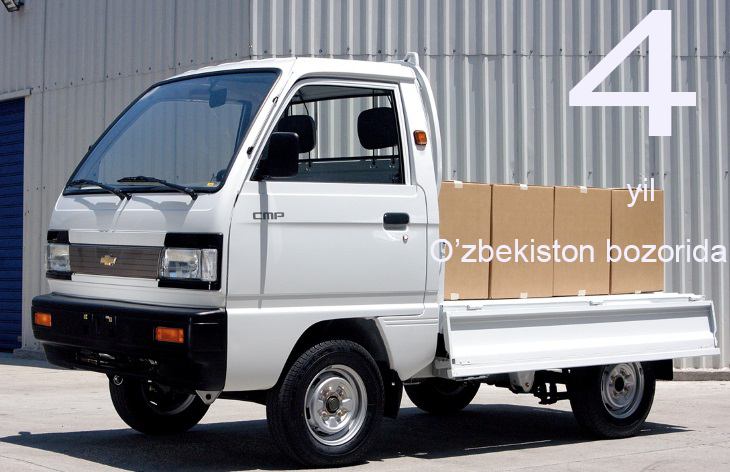
<style>
.page{position:relative;width:730px;height:472px}
.page>*{position:absolute;margin:0}
.t1{font:175.7px "ArialMT";color:#f2f0fd;scale:1.46 1}
.t2{font:32px "ArialMT";color:#f2f0fd}
</style>
<div class="page">
<p class="t1" style="left:569px;top:10px;width:127px;height:126px">4</p>
<p class="t2" style="left:626px;top:178px;width:28px;height:29px">yil</p>
<p class="t2" style="left:430px;top:239px;width:297px;height:23px">O’zbekiston bozorida</p>
</div>
